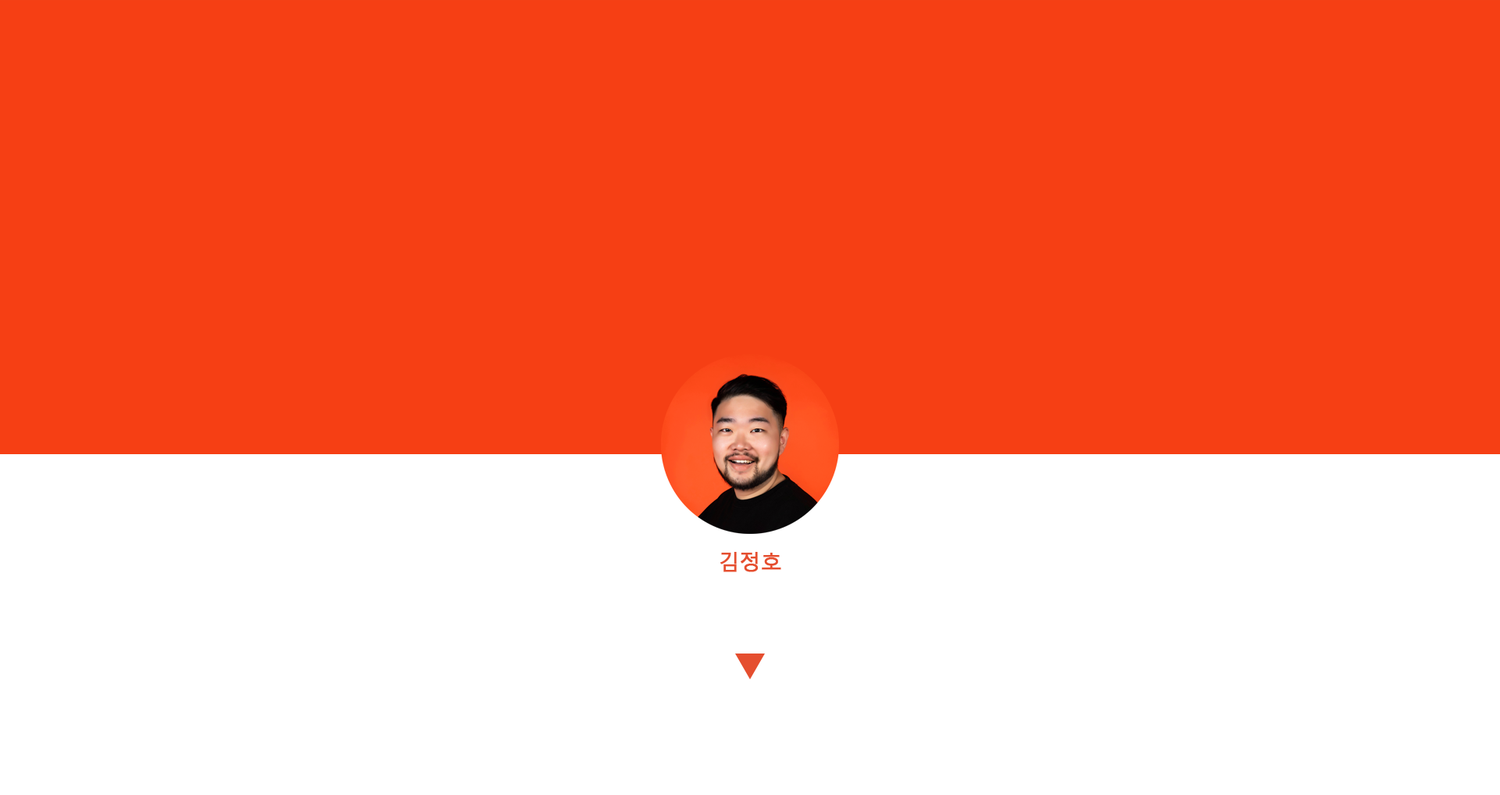
<style>
.page{position:relative;width:1500px;height:795px;background:#f63f14}
.page>*{position:absolute;margin:0}
.t1{font:20.8px "MalgunGothic";color:#e54e2f;font-weight:bold}
</style>
<div class="page">
<p class="t1" style="left:721px;top:552px;width:60px;height:20px">김정호</p>
</div>
